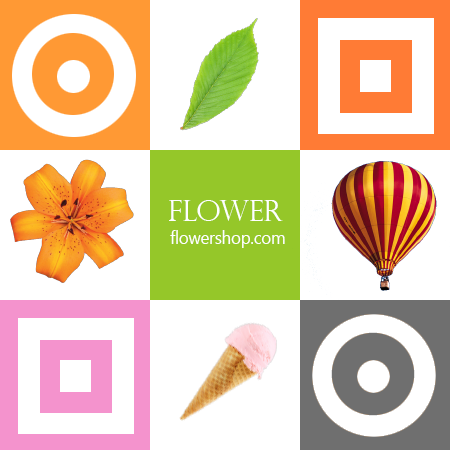
<style>
.page{position:relative;width:450px;height:450px;background:#ffffff}
.page>*{position:absolute;margin:0}
.t1{font:29.4px "PerpetuaTitlingMT-Light";letter-spacing:-0.02em;color:#ffffff}
.t2{font:18px "MicrosoftTaiLe";letter-spacing:-0.02em;color:#ffffff;scale:0.95 1}
</style>
<div class="page">
<p class="t1" style="left:169px;top:200px;width:114px;height:21px">flower</p>
<p class="t2" style="left:170px;top:230px;width:115px;height:18px">flowershop.com</p>
</div>
